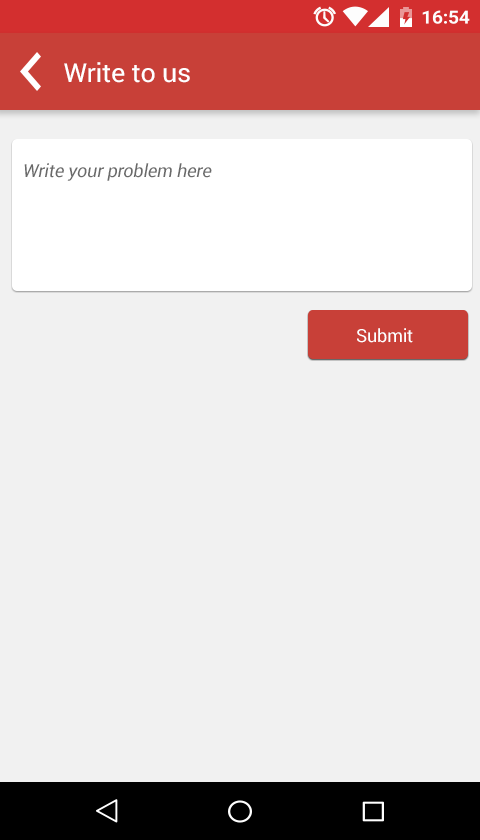
<style>
.page{position:relative;width:480px;height:840px;background:#f1f1f1}
.page>*{position:absolute;margin:0}
.t1{font:26.1px "Roboto-Regular";letter-spacing:-0.01em;color:#ffffff;scale:1.03 1}
.t2{font:18px "Roboto-Regular";letter-spacing:-0.01em;color:#6a6a6a;font-style:italic}
.t3{font:18px "Roboto-Regular";letter-spacing:-0.01em;color:#ffffff}
</style>
<div class="page">
<p class="t1" style="left:64px;top:62px;width:126px;height:21px">Write to us</p>
<p class="t2" style="left:24px;top:163px;width:188px;height:18px">Write your problem here</p>
<p class="t3" style="left:357px;top:328px;width:56px;height:15px">Submit</p>
</div>
